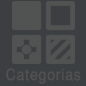
<style>
.page{position:relative;width:86px;height:86px;background:#3c3f41}
.page>*{position:absolute;margin:0}
.t1{font:15.6px "Helvetica-Normal";letter-spacing:0.06em;color:#3c3f41;scale:0.89 1}
</style>
<div class="page">
<p class="t1" style="left:6px;top:68px;width:75px;height:16px">Categorias</p>
</div>
